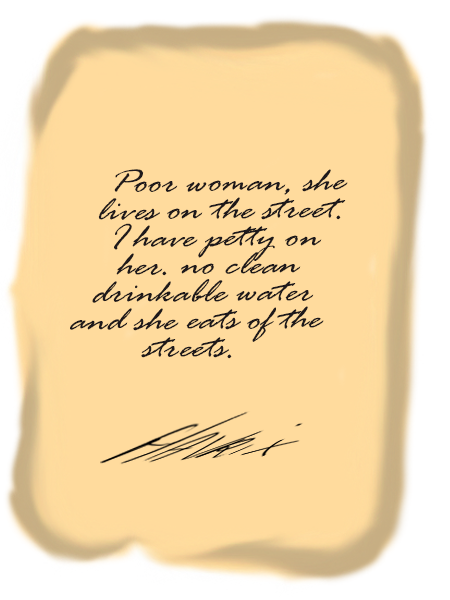
<style>
.page{position:relative;width:450px;height:600px;background:#ffdb9d}
.page>*{position:absolute;margin:0}
.t1{font:36px/28.3px "RageItalic";color:#1e191b;scale:1.1 1}
</style>
<div class="page">
<p class="t1" style="left:70px;top:169px;width:278px;height:190px;text-align:center">Poor woman, she lives on the street. I have petty on her. no clean drinkable water and she eats of the streets.</p>
</div>
